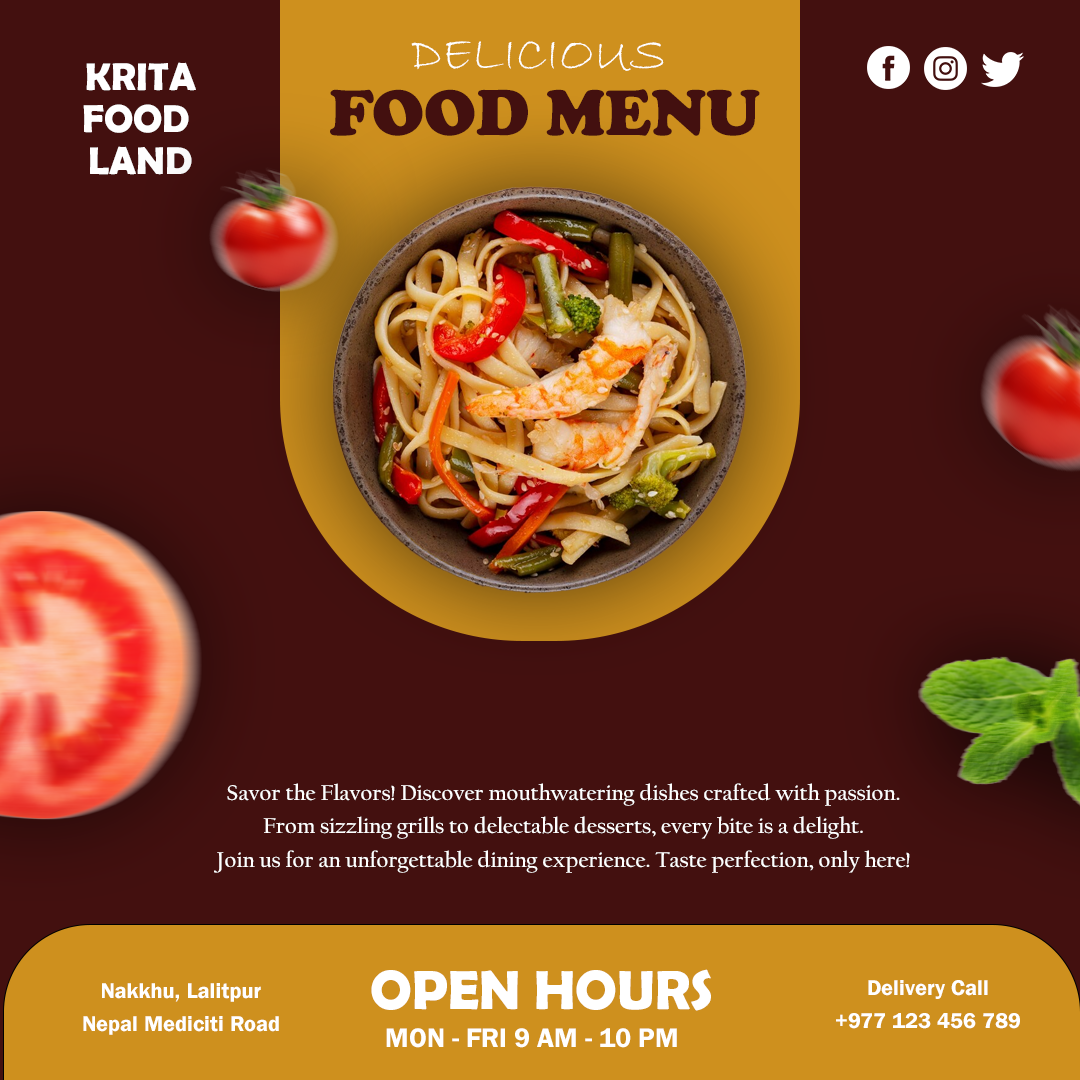
<style>
.page{position:relative;width:1080px;height:1080px;background:#43100f}
.page>*{position:absolute;margin:0}
.t1{font:50px/66.7px "BradleyHandITC";color:#ffffff}
.t2{font:66.7px/66.7px "CooperBlack";color:#43100f}
.t3{font:38.9px/42.2px "BerlinSansFBDemi-Bold";color:#ffffff}
.t4{font:22.2px/33.3px "CalifornianFB-Bold";color:#ffffff}
.t5{font:55.6px "BerlinSansFBDemi-Bold";color:#ffffff}
.t6{font:22.2px/33.3px "FranklinGothic-Demi";color:#ffffff}
.t7{font:27.8px "FranklinGothic-Demi";color:#ffffff}
</style>
<div class="page">
<p class="t1" style="left:330px;top:41px;width:430px;height:95px;text-align:center">DELICIOUS <br><span class="t2">FOOD MENU</span></p>
<p class="t3" style="left:83px;top:62px;width:113px;height:113px;text-align:center">KRITA<br>FOOD <br>LAND</p>
<p class="t4" style="left:214px;top:783px;width:696px;height:90px;text-align:center">Savor the Flavors! Discover mouthwatering dishes crafted with passion.<br> From sizzling grills to delectable desserts, every bite is a delight. <br>Join us for an unforgettable dining experience. Taste perfection, only here!</p>
<p class="t5" style="left:371px;top:969px;width:340px;height:42px">OPEN HOURS</p>
<p class="t6" style="left:83px;top:983px;width:196px;height:52px;text-align:center">Nakkhu, Lalitpur<br>Nepal Mediciti Road</p>
<p class="t6" style="left:836px;top:980px;width:184px;height:49px;text-align:center">Delivery Call<br>+977 123 456 789</p>
<p class="t7" style="left:386px;top:1028px;width:291px;height:20px">MON - FRI 9 AM - 10 PM</p>
</div>
